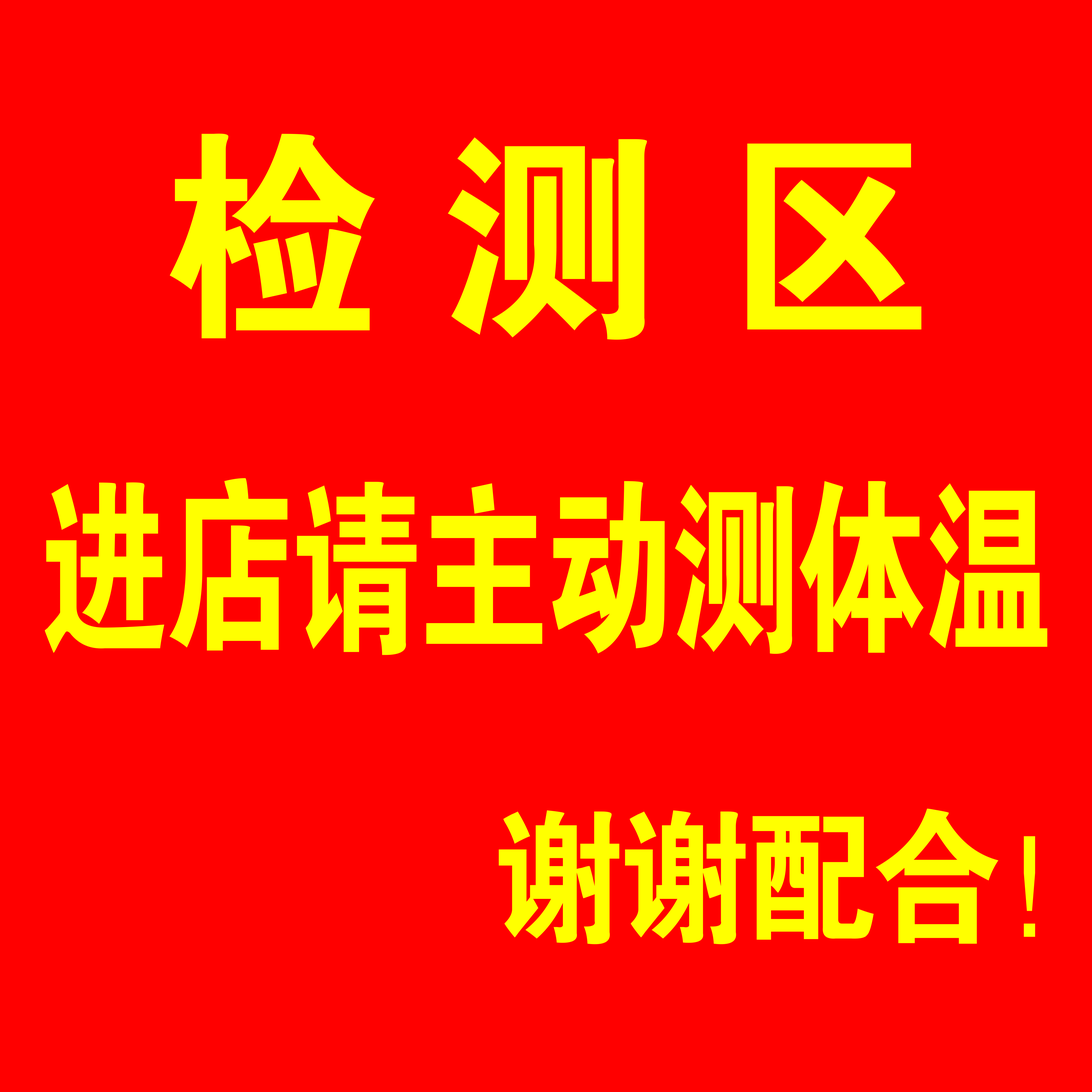
<style>
.page{position:relative;width:1092px;height:1092px;background:#ff0000}
.page>*{position:absolute;margin:0}
.t1{font:226.6px "FZDHTJW--GB1-0";letter-spacing:0.26em;color:#ffff00}
.t2{font:189.3px "FZDHTJW--GB1-0";letter-spacing:-0.04em;color:#ffff00;scale:0.69 1}
.t3{font:147.1px "FZDHTJW--GB1-0";letter-spacing:-0.04em;color:#ffff00;scale:0.89 1}
</style>
<div class="page">
<p class="t1" style="left:170px;top:133px;width:752px;height:207px">检测区</p>
<p class="t2" style="left:45px;top:478px;width:1002px;height:177px">进店请主动测体温</p>
<p class="t3" style="left:499px;top:809px;width:536px;height:135px">谢谢配合！</p>
</div>
